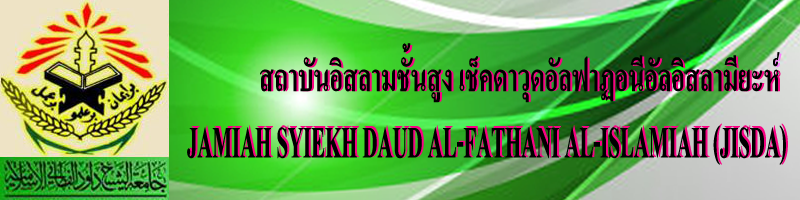
<style>
.page{position:relative;width:800px;height:200px}
.page>*{position:absolute;margin:0}
.t1{font:53.6px "AngsanaUPC-Bold";color:#000000;scale:0.66 1}
.t2{font:51.5px "AngsanaUPC-Bold";scale:0.68 1}
.t3{font:67.3px "AngsanaUPC-Bold";color:#000000;scale:0.47 1}
.t4{font:70.7px "AngsanaUPC-Bold";scale:0.45 1}
</style>
<div class="page">
<p class="t1" style="left:260px;top:43px;width:520px;height:60px">สถาบันอิสลามชั้นสูง เช็คดาวุดอัลฟาฏอนีอัลอิสลามียะห์</p>
<p class="t2" style="left:262px;top:45px;width:520px;height:57px">สถาบันอิสลามชั้นสูง เช็คดาวุดอัลฟาฏอนีอัลอิสลามียะห์</p>
<p class="t3" style="left:187px;top:125px;width:599px;height:40px">JAMIAH SYIEKH DAUD AL-FATHANI AL-ISLAMIAH (JISDA)</p>
<p class="t4" style="left:189px;top:123px;width:599px;height:42px">JAMIAH SYIEKH DAUD AL-FATHANI AL-ISLAMIAH (JISDA)</p>
</div>
